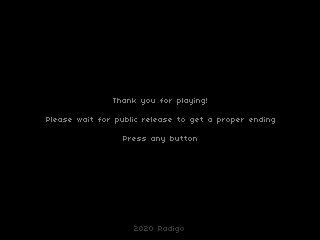
<style>
.page{position:relative;width:320px;height:240px;background:#000000}
.page>*{position:absolute;margin:0}
.t1{font:8px "04b03";color:#808080}
.t2{font:8px "04b03";color:#3b3b3b}
</style>
<div class="page">
<p class="t1" style="left:46px;top:98px;width:229px;height:45px;text-align:center">Thank you for playing!<br><br>Please wait for public release to get a proper ending<br><br>Press any button</p>
<p class="t2" style="left:134px;top:226px;width:50px;height:7px">2020 Radigo</p>
</div>
